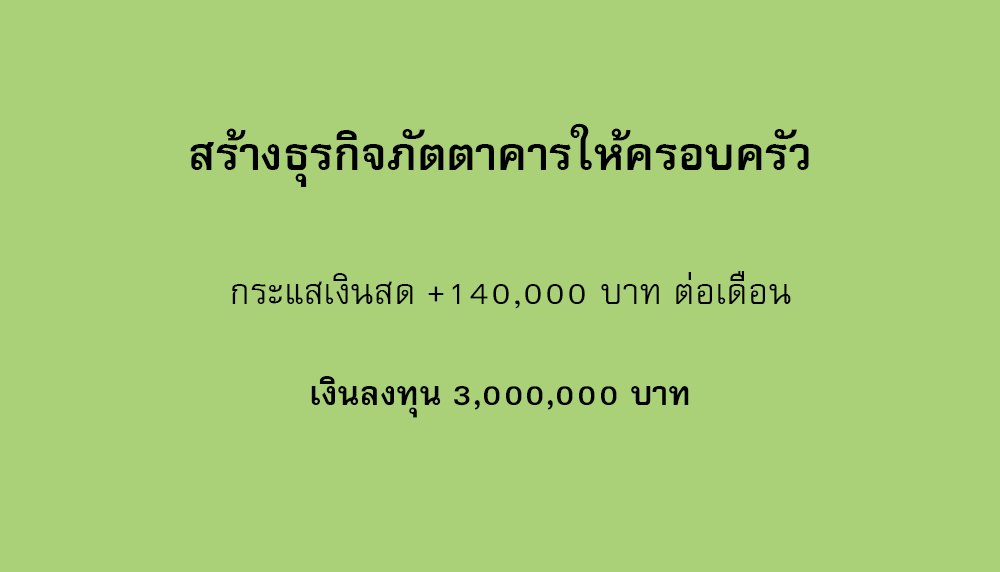
<style>
.page{position:relative;width:1000px;height:572px;background:#aad178}
.page>*{position:absolute;margin:0}
.t1{font:64px "FreesiaUPCBold";color:#000000}
.t2{font:50px "FreesiaUPC";color:#000000}
.t3{font:47px "FreesiaUPCBold";color:#000000}
</style>
<div class="page">
<p class="t1" style="left:190px;top:123px;width:619px;height:64px">สร้างธุรกิจภัตตาคารให้ครอบครัว</p>
<p class="t2" style="left:232px;top:271px;width:559px;height:38px">กระแสเงินสด +140,000 บาท ต่อเดือน</p>
<p class="t3" style="left:311px;top:376px;width:378px;height:42px">เงินลงทุน 3,000,000 บาท</p>
</div>
